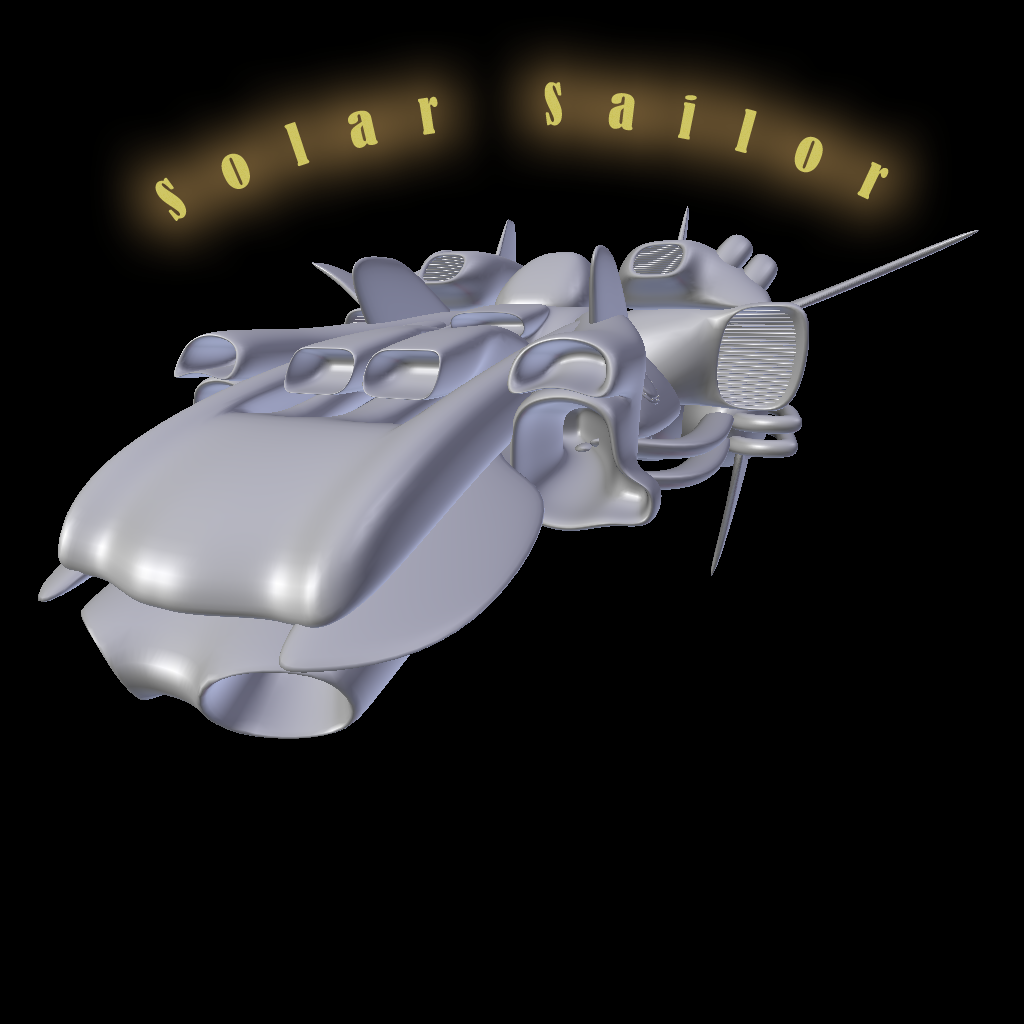
<style>
.page{position:relative;width:1024px;height:1024px;background:#000000}
.page>*{position:absolute;margin:0}
.t1{font:54px "BernardMT-Condensed";letter-spacing:0.76em;color:#cfc665}
</style>
<div class="page">
<p class="t1" style="left:155px;top:82px;width:734px;height:139px">Solar Sailor</p>
</div>
